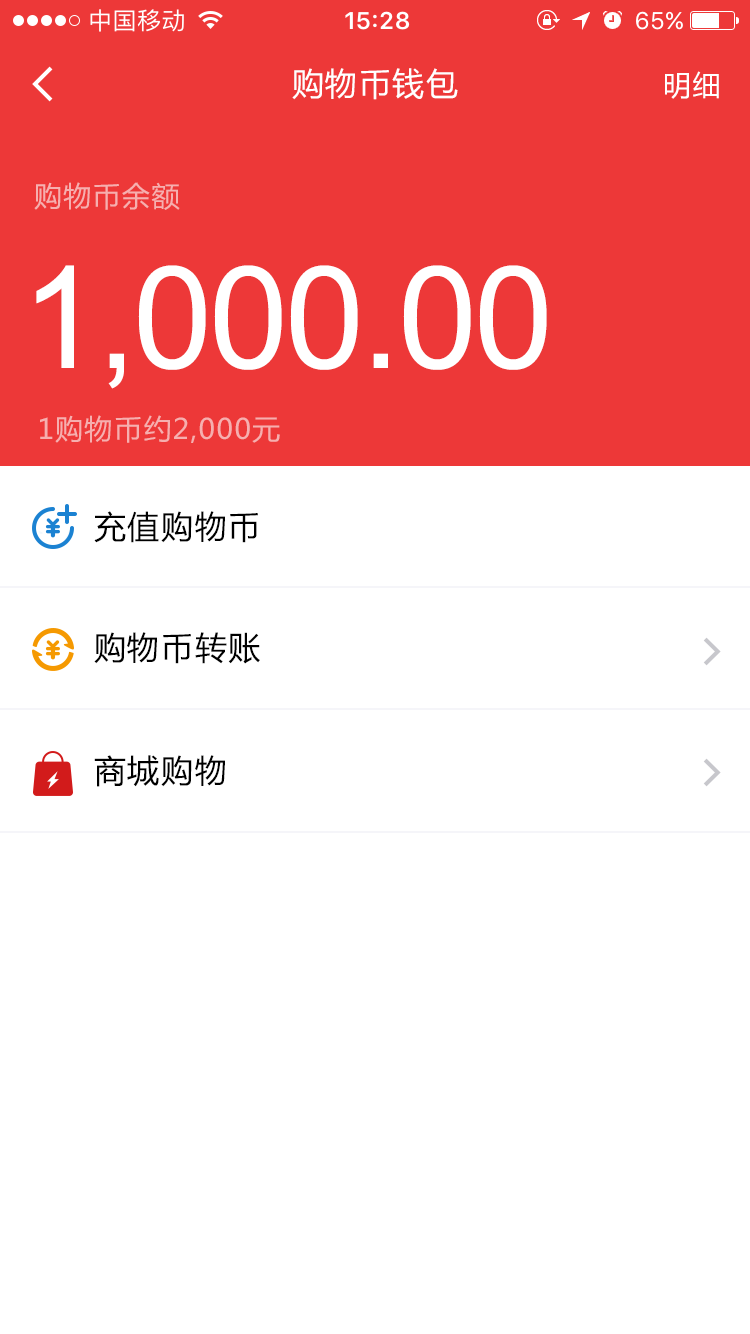
<style>
.page{position:relative;width:750px;height:1334px;background:#ffffff}
.page>*{position:absolute;margin:0}
.t1{font:32px "MicrosoftYaHei";letter-spacing:0.05em;color:#ffffff}
.t2{font:28px "MicrosoftYaHei";letter-spacing:0.05em;color:#ffffff}
.t3{font:28px "MicrosoftYaHei";letter-spacing:0.05em;color:#f6afaf}
.t4{font:142.5px "ArialMT";letter-spacing:-0.022em;color:#ffffff}
.t5{font:32px "MicrosoftYaHei";letter-spacing:0.05em;color:#000000}
</style>
<div class="page">
<p class="t1" style="left:292px;top:68px;width:166px;height:32px">购物币钱包</p>
<p class="t2" style="left:665px;top:71px;width:54px;height:28px">明细</p>
<p class="t3" style="left:34px;top:182px;width:146px;height:28px">购物币余额</p>
<p class="t4" style="left:36px;top:265px;width:511px;height:124px">1,000.00</p>
<p class="t3" style="left:40px;top:415px;width:240px;height:28px">1购物币约2,000元</p>
<p class="t5" style="left:94px;top:511px;width:164px;height:32px">充值购物币</p>
<p class="t5" style="left:94px;top:632px;width:166px;height:32px">购物币转账</p>
<p class="t5" style="left:94px;top:755px;width:131px;height:32px">商城购物</p>
</div>
